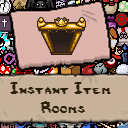
<style>
.page{position:relative;width:128px;height:128px;background:#c7b199}
.page>*{position:absolute;margin:0}
.t1{font:16px "IsaacGame";color:#2c2008}
</style>
<div class="page">
<p class="t1" style="left:10px;top:82px;width:101px;height:31px;text-align:center">Instant Item <br>Rooms</p>
</div>
